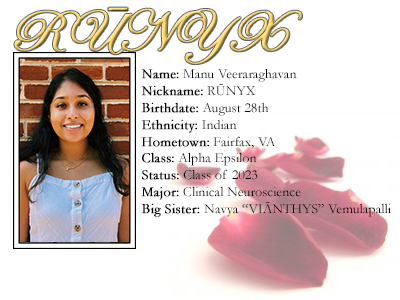
<style>
.page{position:relative;width:400px;height:300px;background:#ffffff}
.page>*{position:absolute;margin:0}
.t1{font:58px "EdwardianScriptITC";font-weight:bold}
.t2{font:14px "Garamond";color:#000000}
.t3{font:14px "Garamond";color:#000000;font-weight:bold}
</style>
<div class="page">
<p class="t1" style="left:14px;top:8px;width:288px;height:56px">RUNYX</p>
<p class="t2" style="left:141px;top:68px;width:250px;height:149px"><span class="t3">Name:</span> Manu Veeraraghavan<br><span class="t3">Nickname:</span> RŪNYX<br><span class="t3">Birthdate:</span> August 28th<br><span class="t3">Ethnicity:</span> Indian<br><span class="t3">Hometown:</span> Fairfax, VA<br><span class="t3">Class:</span> Alpha Epsilon<br><span class="t3">Status:</span> Class of 2023<br><span class="t3">Major:</span> Clinical Neuroscience<br><span class="t3">Big Sister: </span>Navya “VIĀNTHYS” Vemulapalli</p>
</div>
